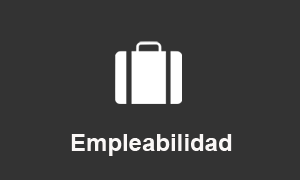
<style>
.page{position:relative;width:300px;height:180px;background:#333333}
.page>*{position:absolute;margin:0}
.t1{font:24px "Arial-BoldMT";color:#faf7f6}
</style>
<div class="page">
<p class="t1" style="left:71px;top:134px;width:161px;height:22px">Empleabilidad</p>
</div>
